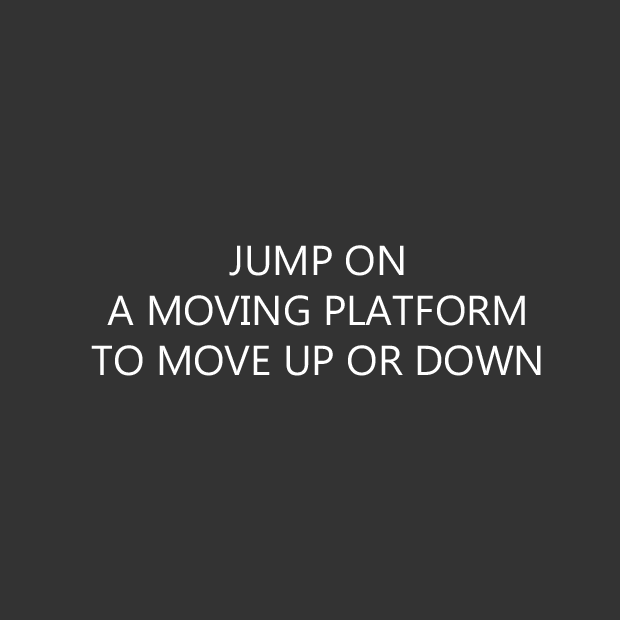
<style>
.page{position:relative;width:620px;height:620px;background:#333333}
.page>*{position:absolute;margin:0}
.t1{font:41.7px "MicrosoftPhagsPa";color:#ffffff}
</style>
<div class="page">
<p class="t1" style="left:91px;top:245px;width:450px;height:131px;text-align:center">JUMP ON<br>A MOVING PLATFORM<br>TO MOVE UP OR DOWN</p>
</div>
